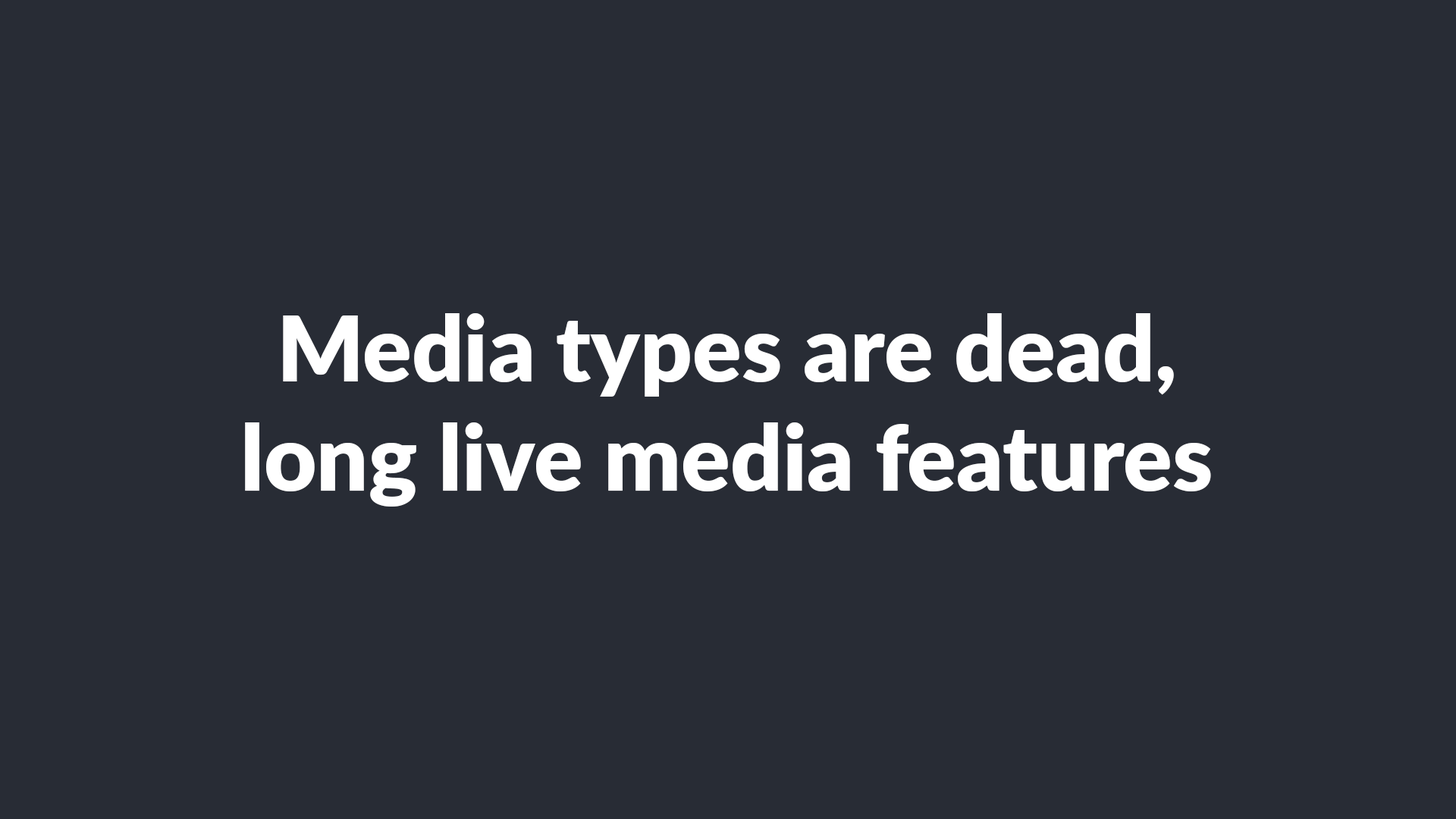
<style>
.page{position:relative;width:1456px;height:819px;background:#282c35}
.page>*{position:absolute;margin:0}
.t1{font:91px "Lato-ExtraBold";color:#ffffff}
</style>
<div class="page">
<p class="t1" style="left:245px;top:313px;width:966px;height:194px;text-align:center">Media types are dead,<br>long live media features</p>
</div>
